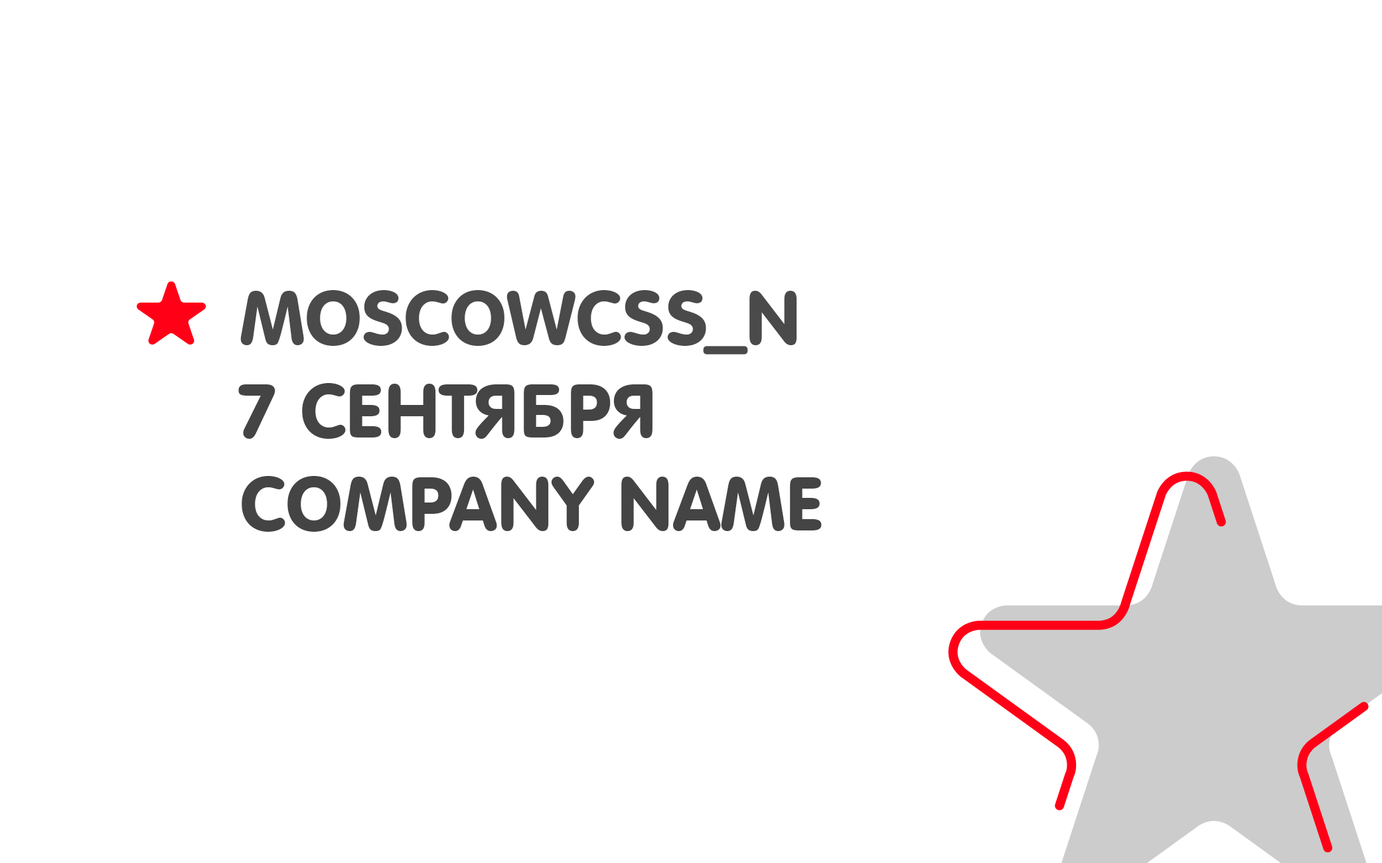
<style>
.page{position:relative;width:1382px;height:863px;background:#ffffff}
.page>*{position:absolute;margin:0}
.t1{font:74.1px/92.9px "VAGRoundedTL-Regular";color:#444444;text-transform:uppercase}
.t2{font:74.1px/92.9px "VAGRoundedTL-Regular";color:#4a4a4a;text-transform:uppercase}
</style>
<div class="page">
<p class="t1" style="left:238px;top:290px;width:584px;height:242px"><span class="t2">moscowcss_N<br></span>7 сентября<br>COMPANY NAME</p>
</div>
